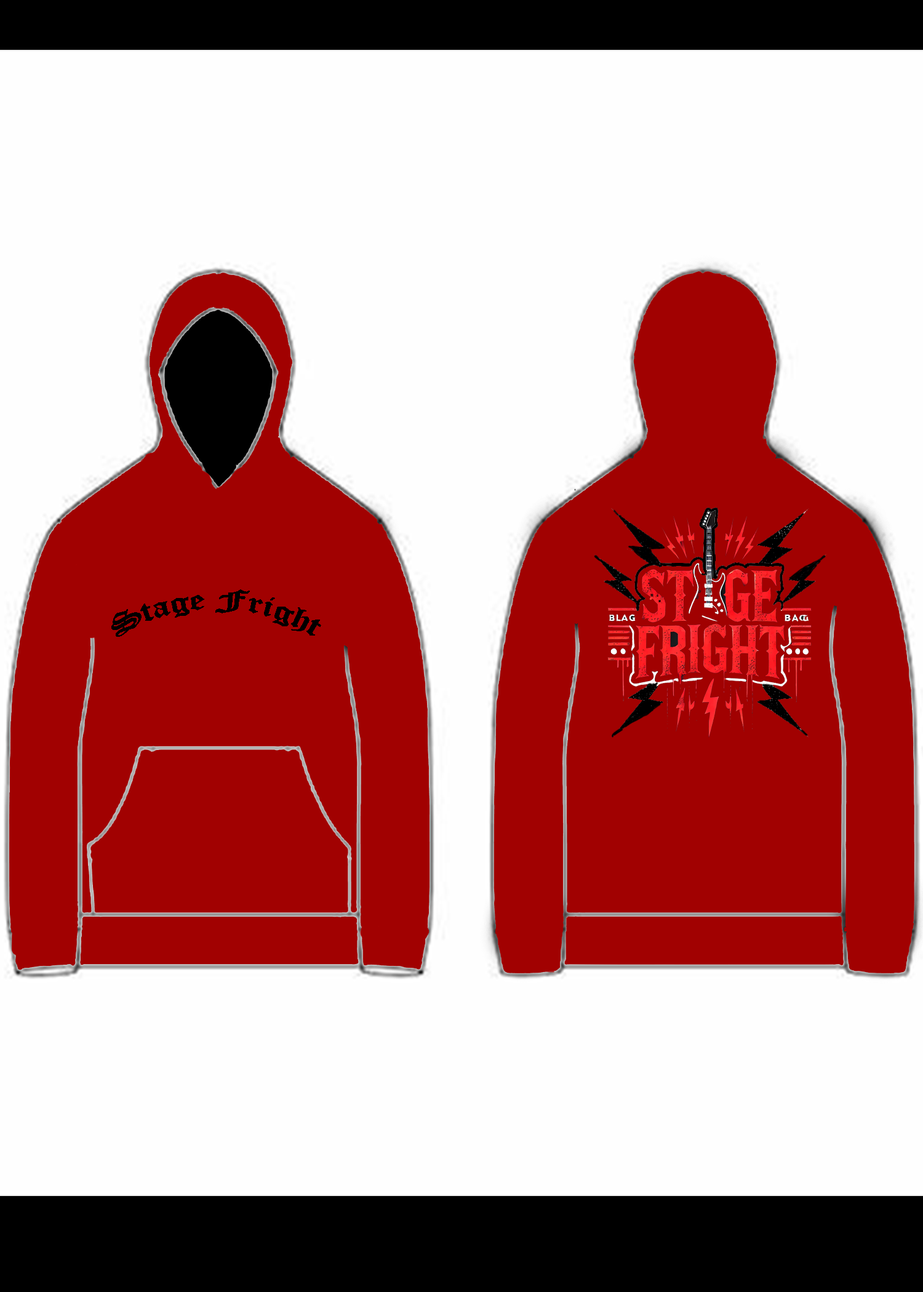
<style>
.page{position:relative;width:923px;height:1292px;background:#fefefe}
.page>*{position:absolute;margin:0}
.t1{font:28.2px "OldEnglishTextMT";color:#000000}
</style>
<div class="page">
<p class="t1" style="left:111px;top:589px;width:210px;height:48px">Stage Fright</p>
</div>
